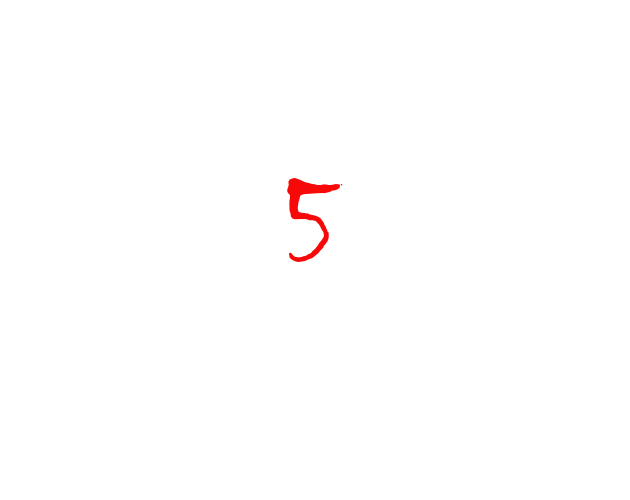
<style>
.page{position:relative;width:630px;height:500px;background:#ffffff}
.page>*{position:absolute;margin:0}
.t1{font:138.9px "Chiller-Regular";color:#f80909}
</style>
<div class="page">
<p class="t1" style="left:287px;top:178px;width:56px;height:84px">5</p>
</div>
